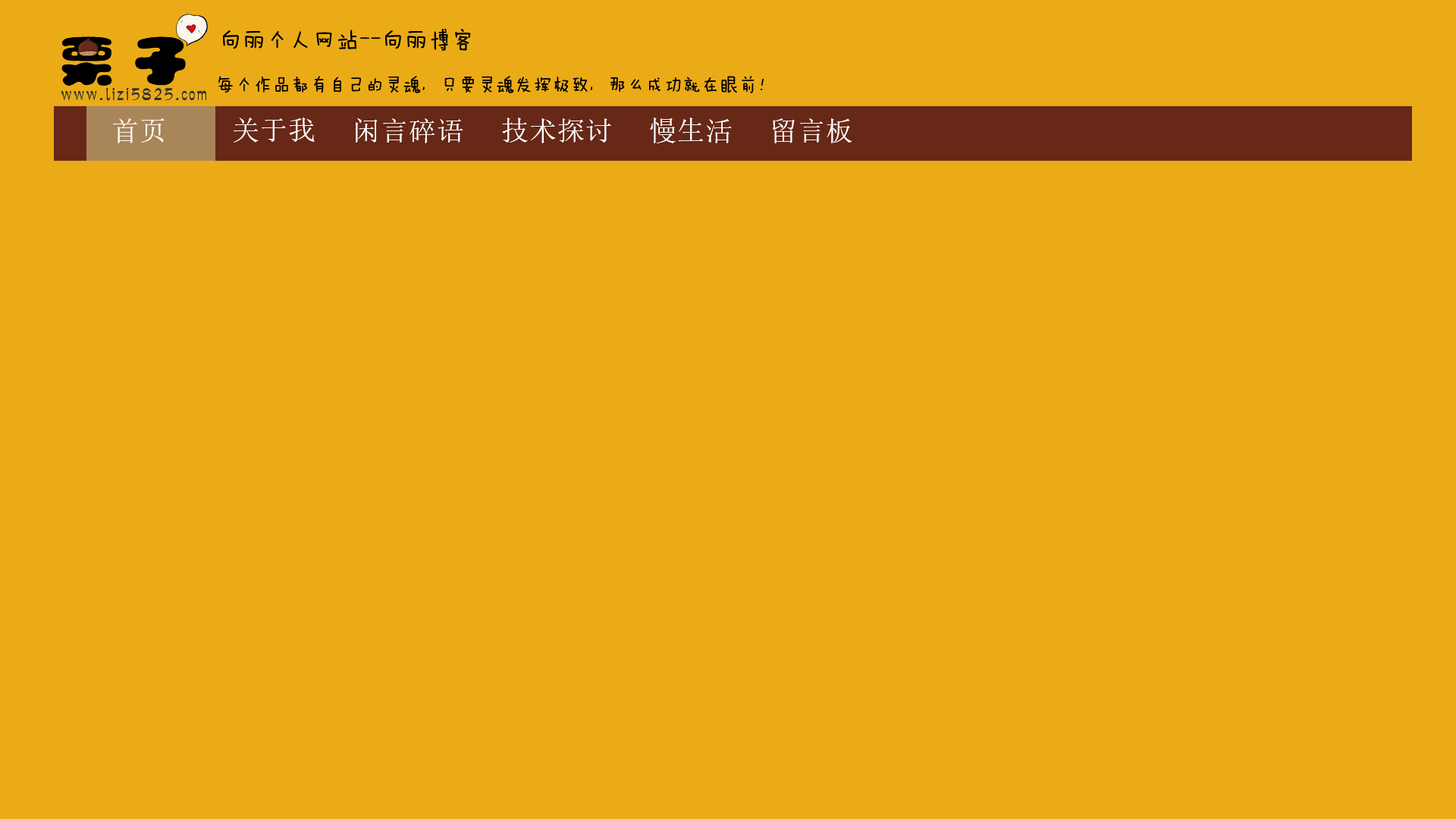
<style>
.page{position:relative;width:1456px;height:819px;background:#ebab16}
.page>*{position:absolute;margin:0}
.t1{font:22.7px "FZMWJW--GB1-0";letter-spacing:0.025em;color:#000000}
.t2{font:18.2px "FZMWJW--GB1-0";letter-spacing:0.025em;color:#000000}
.t3{font:27.3px "SimSun";letter-spacing:0.025em;color:#ffffff}
</style>
<div class="page">
<p class="t1" style="left:223px;top:28px;width:248px;height:23px">向丽个人网站--向丽博客</p>
<p class="t2" style="left:218px;top:76px;width:546px;height:17px">每个作品都有自己的灵魂，只要灵魂发挥极致，那么成功就在眼前！</p>
<p class="t3" style="left:113px;top:118px;width:52px;height:25px">首页</p>
<p class="t3" style="left:234px;top:118px;width:81px;height:25px">关于我</p>
<p class="t3" style="left:356px;top:118px;width:107px;height:25px">闲言碎语</p>
<p class="t3" style="left:502px;top:118px;width:109px;height:25px">技术探讨</p>
<p class="t3" style="left:650px;top:118px;width:82px;height:25px">慢生活</p>
<p class="t3" style="left:773px;top:118px;width:79px;height:25px">留言板</p>
</div>
